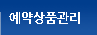
<style>
.page{position:relative;width:97px;height:35px}
.page>*{position:absolute;margin:0}
.t1{font:13px "NanumGothicExtraBold";color:#ffffff}
</style>
<div class="page">
<p class="t1" style="left:9px;top:12px;width:71px;height:12px">예약상품관리</p>
</div>
